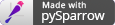
<style>
.page{position:relative;width:115px;height:25px}
.page>*{position:absolute;margin:0}
.t1{font:8.3px "OpenSans-Regular";letter-spacing:0.05em;color:#ffffff}
.t2{font:12.5px "OpenSans-Regular";color:#ffffff}
</style>
<div class="page">
<p class="t1" style="left:42px;top:1px;width:44px;height:8px">Made with</p>
<p class="t2" style="left:42px;top:11px;width:63px;height:12px">pySparrow</p>
</div>
